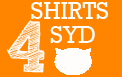
<style>
.page{position:relative;width:122px;height:77px;background:#ff8400}
.page>*{position:absolute;margin:0}
.t1{font:24px "Rockwell";color:#fdfdfd}
.t2{font:72px "SketchRockwell";color:#fdfdfd}
</style>
<div class="page">
<p class="t1" style="left:31px;top:2px;width:77px;height:17px">SHIRTS</p>
<p class="t2" style="left:6px;top:20px;width:39px;height:53px">4</p>
<p class="t1" style="left:50px;top:26px;width:45px;height:17px">SYD</p>
</div>
